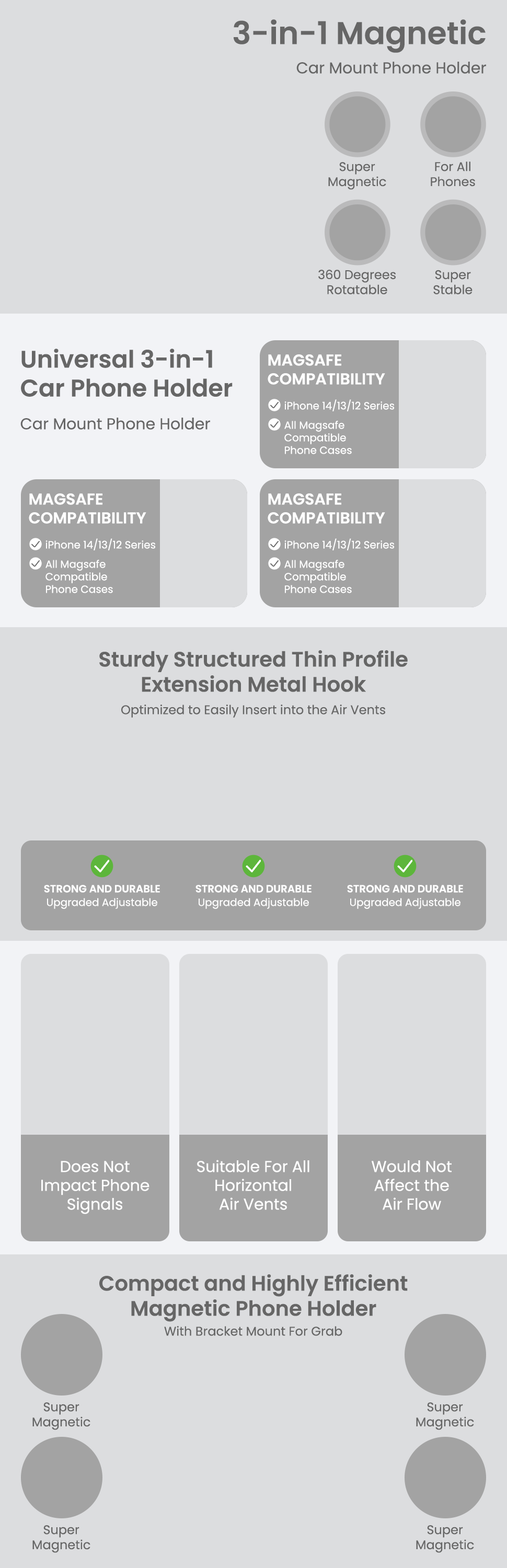
<style>
.page{position:relative;width:507px;height:1568px;background:#dcdddf}
.page>*{position:absolute;margin:0}
.t1{font:31.4px "Poppins-SemiBold";color:#666666}
.t2{font:15.7px "Poppins-Regular";color:#666666}
.t3{font:12.5px "Poppins-Regular";color:#666666}
.t4{font:24px "Poppins-SemiBold";color:#666666}
.t5{font:15.7px "Poppins-SemiBold";color:#ffffff;text-transform:uppercase}
.t6{font:10.5px "Poppins-Regular";color:#ffffff}
.t7{font:20.9px "Poppins-SemiBold";color:#666666}
.t8{font:10.5px "Poppins-SemiBold";color:#ffffff;text-transform:uppercase}
.t9{font:15.7px "Poppins-Regular";color:#ffffff}
</style>
<div class="page">
<p class="t1" style="left:234px;top:19px;width:252px;height:34px">3-in-1 Magnetic</p>
<p class="t2" style="left:296px;top:62px;width:190px;height:12px">Car Mount Phone Holder</p>
<p class="t3" style="left:431px;top:162px;width:44px;height:25px;text-align:center">For All<br>Phones</p>
<p class="t3" style="left:328px;top:162px;width:58px;height:28px;text-align:center">Super<br>Magnetic</p>
<p class="t3" style="left:318px;top:270px;width:78px;height:24px;text-align:center">360 Degrees<br>Rotatable</p>
<p class="t3" style="left:433px;top:270px;width:39px;height:24px;text-align:center">Super<br>Stable</p>
<p class="t4" style="left:21px;top:349px;width:212px;height:48px">Universal 3-in-1<br>Car Phone Holder</p>
<p class="t5" style="left:268px;top:354px;width:117px;height:31px">MagSafe<br>Compatibility</p>
<p class="t6" style="left:284px;top:399px;width:111px;height:12px">iPhone 14/13/12 Series</p>
<p class="t2" style="left:20px;top:418px;width:190px;height:12px">Car Mount Phone Holder</p>
<p class="t6" style="left:284px;top:421px;width:68px;height:33px">All Magsafe<br>Compatible<br>Phone Cases</p>
<p class="t5" style="left:29px;top:493px;width:117px;height:31px">MagSafe<br>Compatibility</p>
<p class="t5" style="left:268px;top:493px;width:117px;height:31px">MagSafe<br>Compatibility</p>
<p class="t6" style="left:45px;top:538px;width:111px;height:12px">iPhone 14/13/12 Series</p>
<p class="t6" style="left:284px;top:538px;width:111px;height:12px">iPhone 14/13/12 Series</p>
<p class="t6" style="left:45px;top:560px;width:68px;height:33px">All Magsafe<br>Compatible<br>Phone Cases</p>
<p class="t6" style="left:284px;top:560px;width:68px;height:33px">All Magsafe<br>Compatible<br>Phone Cases</p>
<p class="t7" style="left:99px;top:650px;width:309px;height:42px;text-align:center">Sturdy Structured Thin Profile<br>Extension Metal Hook</p>
<p class="t3" style="left:121px;top:705px;width:264px;height:13px">Optimized to Easily Insert into the Air Vents</p>
<p class="t8" style="left:44px;top:885px;width:116px;height:8px">Strong and Durable</p>
<p class="t8" style="left:195px;top:885px;width:117px;height:8px">Strong and Durable</p>
<p class="t8" style="left:347px;top:885px;width:116px;height:8px">Strong and Durable</p>
<p class="t6" style="left:47px;top:898px;width:110px;height:11px">Upgraded Adjustable</p>
<p class="t6" style="left:199px;top:898px;width:110px;height:11px">Upgraded Adjustable</p>
<p class="t6" style="left:350px;top:898px;width:110px;height:11px">Upgraded Adjustable</p>
<p class="t9" style="left:41px;top:1161px;width:108px;height:53px;text-align:center">Does Not<br>Impact Phone<br>Signals</p>
<p class="t9" style="left:197px;top:1160px;width:112px;height:50px;text-align:center">Suitable For All<br>Horizontal<br>Air Vents</p>
<p class="t9" style="left:372px;top:1160px;width:80px;height:50px;text-align:center">Would Not<br>Affect the<br>Air Flow</p>
<p class="t7" style="left:99px;top:1274px;width:309px;height:48px;text-align:center">Compact and Highly Efficient<br>Magnetic Phone Holder</p>
<p class="t3" style="left:164px;top:1326px;width:178px;height:10px">With Bracket Mount For Grab</p>
<p class="t3" style="left:32px;top:1402px;width:58px;height:28px;text-align:center">Super<br>Magnetic</p>
<p class="t3" style="left:416px;top:1402px;width:58px;height:28px;text-align:center">Super<br>Magnetic</p>
<p class="t3" style="left:32px;top:1525px;width:58px;height:28px;text-align:center">Super<br>Magnetic</p>
<p class="t3" style="left:416px;top:1525px;width:58px;height:28px;text-align:center">Super<br>Magnetic</p>
</div>
